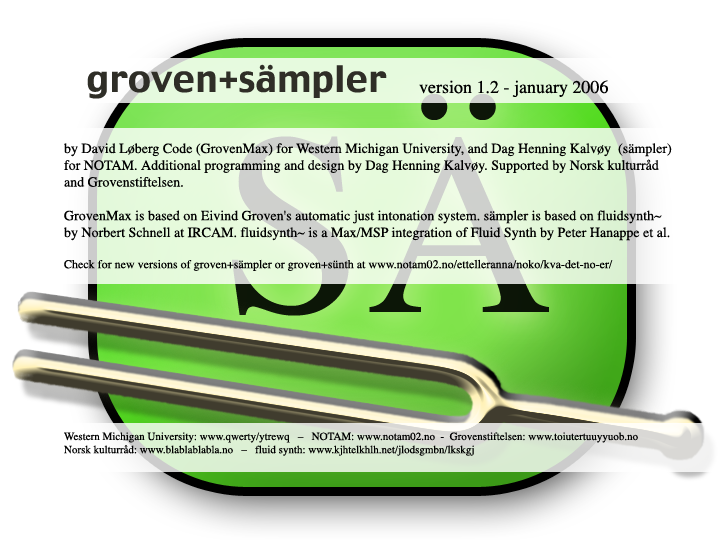
<style>
.page{position:relative;width:720px;height:540px;background:#ffffff}
.page>*{position:absolute;margin:0}
.t1{font:36px "Charcoal";color:#2f2e27}
.t2{font:18px "Times-Roman";color:#000000}
.t3{font:260px "Times-Roman"}
.t4{font:14px "Times-Roman";color:#000000}
.t5{font:12px "Times-Roman";color:#000000}
.t6{font:11px "Times-Roman";color:#000000}
</style>
<div class="page">
<p class="t1" style="left:87px;top:64px;width:300px;height:35px">groven+sämpler</p>
<p class="t2" style="left:419px;top:80px;width:189px;height:17px">version 1.2 - january 2006</p>
<p class="t3" style="left:232px;top:94px;width:317px;height:222px">SÄ</p>
<p class="t4" style="left:64px;top:143px;width:608px;height:128px">by David Løberg Code (GrovenMax) for Western Michigan University, and Dag Henning Kalvøy  (sämpler)<br>for NOTAM. Additional programming and design by Dag Henning Kalvøy. Supported by Norsk kulturråd<br>and Grovenstiftelsen.<br><br>GrovenMax is based on Eivind Groven's automatic just intonation system. sämpler is based on fluidsynth~<br>by Norbert Schnell at IRCAM. fluidsynth~ is a Max/MSP integration of Fluid Synth by Peter Hanappe et al.<br><br><span class="t5">Check for new versions of groven+sämpler or groven+sünth at www.notam02.no/ettelleranna/noko/kva-det-no-er/</span></p>
<p class="t6" style="left:64px;top:432px;width:574px;height:24px">Western Michigan University: www.qwerty/ytrewq   –   NOTAM: www.notam02.no  -  Grovenstiftelsen: www.toiutertuuyyuob.no<br>Norsk kulturråd: www.blablablabla.no   –   fluid synth: www.kjhtelkhlh.net/jlodsgmbn/lkskgj</p>
</div>
